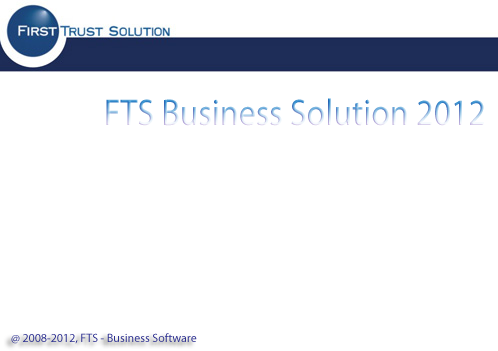
<style>
.page{position:relative;width:498px;height:351px;background:#ffffff}
.page>*{position:absolute;margin:0}
.t1{font:37.4px "MyriadPro-Regular";scale:0.91 1}
.t2{font:12px "MyriadPro-Regular";color:#2e3192}
</style>
<div class="page">
<p class="t1" style="left:106px;top:98px;width:378px;height:28px">FTS Business Solution 2012</p>
<p class="t2" style="left:11px;top:333px;width:186px;height:11px">@ 2008-2012, FTS - Business Software</p>
</div>
